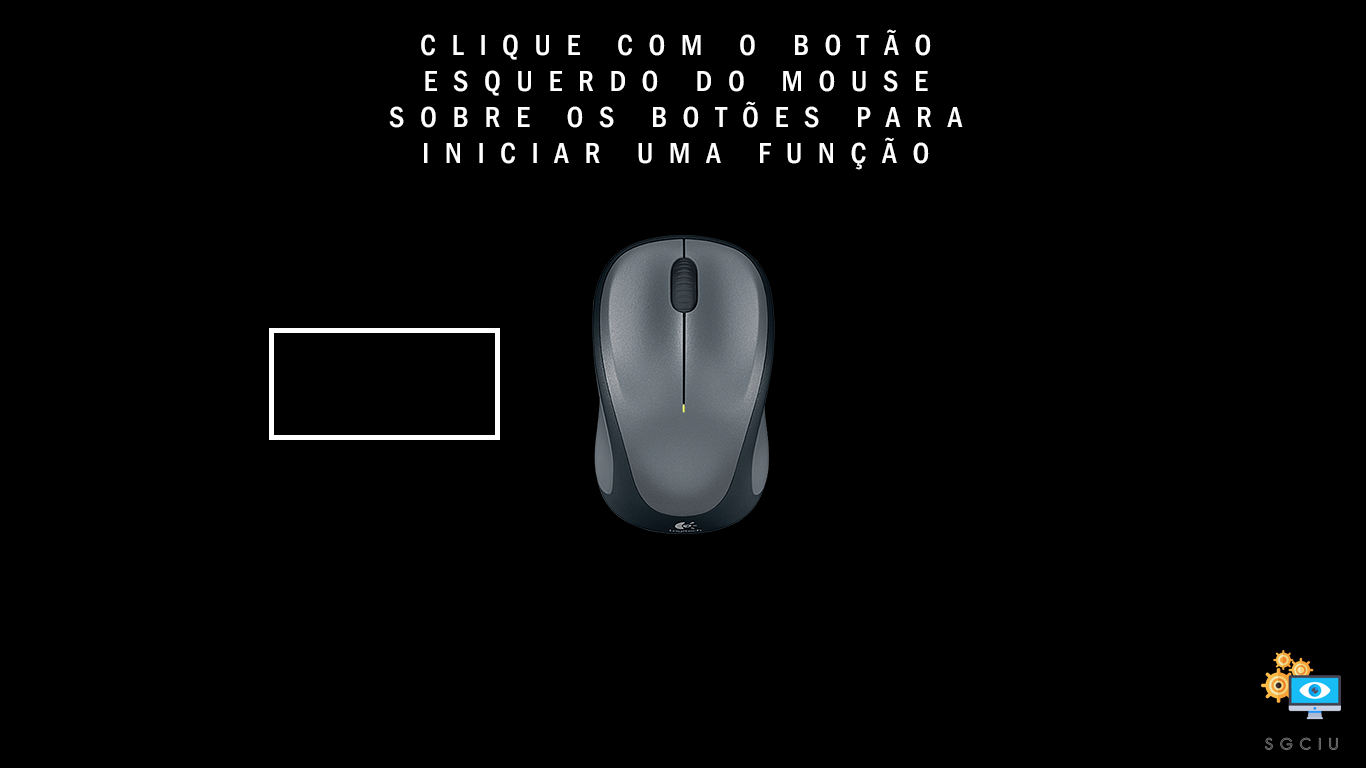
<style>
.page{position:relative;width:1366px;height:768px;background:#000000}
.page>*{position:absolute;margin:0}
.t1{font:29.9px "FranklinGothic-MediumCond";letter-spacing:0.52em;color:#ffffff}
</style>
<div class="page">
<p class="t1" style="left:389px;top:29px;width:574px;height:141px;text-align:center">CLIQUE COM O BOTÃO<br>ESQUERDO DO MOUSE<br>SOBRE OS BOTÕES PARA<br>INICIAR UMA FUNÇÃO</p>
</div>
